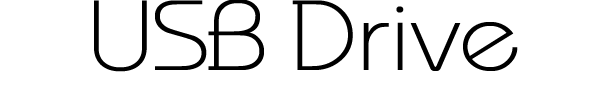
<style>
.page{position:relative;width:598px;height:101px;background:#ffffff}
.page>*{position:absolute;margin:0}
.t1{font:100px "MonaKo";color:#000000;scale:1.1 1}
</style>
<div class="page">
<p class="t1" style="left:94px;top:0px;width:424px;height:72px">USB Drive</p>
</div>
